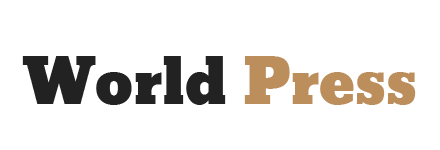
<style>
.page{position:relative;width:440px;height:150px;background:#ffffff}
.page>*{position:absolute;margin:0}
.t1{font:60px "Bevan";color:#222222}
.t2{font:60px "Bevan";color:#bc8e5c}
</style>
<div class="page">
<p class="t1" style="left:22px;top:56px;width:394px;height:49px">World<span class="t2"> Press</span></p>
</div>
